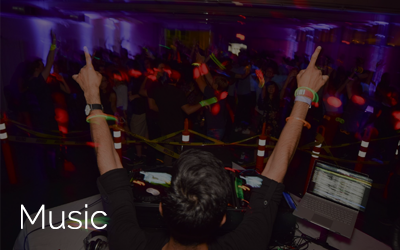
<style>
.page{position:relative;width:400px;height:250px}
.page>*{position:absolute;margin:0}
.t1{font:33.3px "Raleway-Light";color:#ffffff}
</style>
<div class="page">
<p class="t1" style="left:21px;top:204px;width:86px;height:25px">Music</p>
</div>
